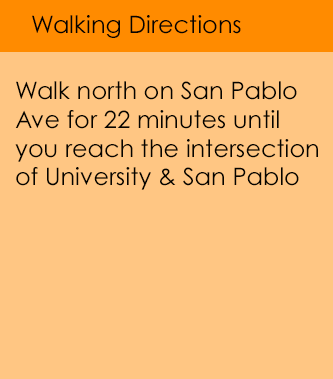
<style>
.page{position:relative;width:333px;height:379px;background:#ffc683}
.page>*{position:absolute;margin:0}
.t1{font:24px "CenturyGothic";color:#050300}
</style>
<div class="page">
<p class="t1" style="left:32px;top:15px;width:209px;height:23px">Walking Directions</p>
<p class="t1" style="left:15px;top:81px;width:303px;height:109px">Walk north on San Pablo <br>Ave for 22 minutes until <br>you reach the intersection <br>of University &amp; San Pablo</p>
</div>
